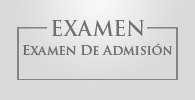
<style>
.page{position:relative;width:195px;height:100px;background:#dadada}
.page>*{position:absolute;margin:0}
.t1{font:20.3px "TrajanPro-Bold";color:#707070}
.t2{font:12.9px "TrajanPro-Bold";color:#707070}
</style>
<div class="page">
<p class="t1" style="left:51px;top:20px;width:94px;height:16px">EXAMEN</p>
<p class="t2" style="left:22px;top:43px;width:150px;height:12px">Examen De Admisión</p>
</div>
